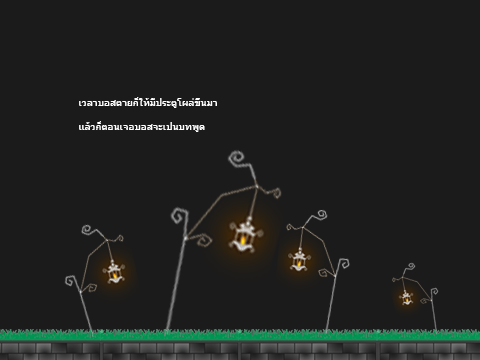
<style>
.page{position:relative;width:480px;height:360px;background:#1b1b1b}
.page>*{position:absolute;margin:0}
.t1{font:10px "Tahoma";color:#ffffff}
</style>
<div class="page">
<p class="t1" style="left:79px;top:97px;width:138px;height:35px;text-align:right">เวลาบอสตายก็ให้มีประตูโผล่ขึ้นมา<br><br>แล้วก็ตอนเจอบอสจะเปนบทพูด</p>
</div>
